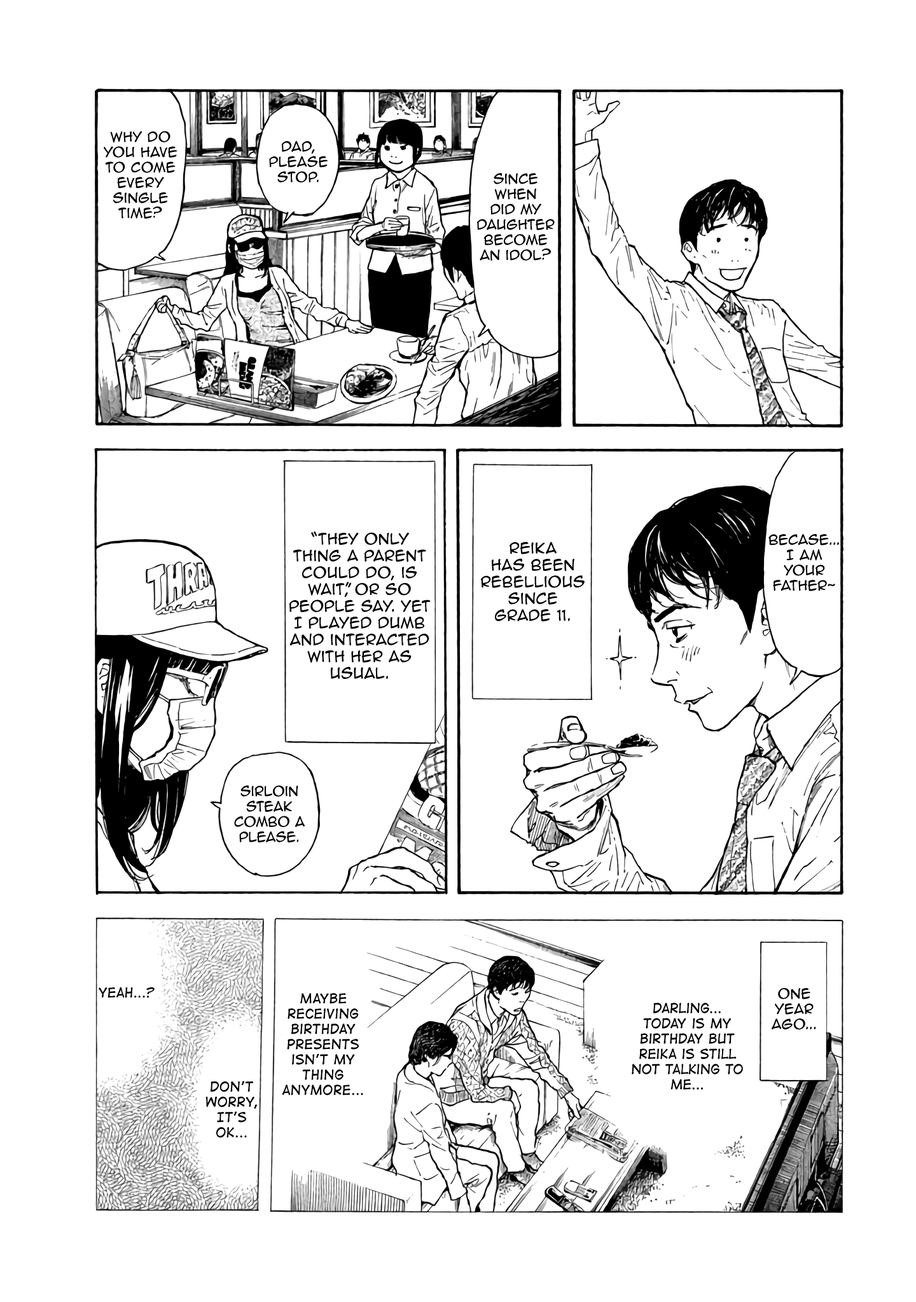
<style>
.page{position:relative;width:916px;height:1302px;background:#ffffff}
.page>*{position:absolute;margin:0}
.t1{font:12.7px "AnimeAce2.0BB";color:#000000}
.t2{font:14px "AnimeAce2.0BB";color:#000000}
.t3{font:12.7px "DigitalStrip";color:#000000}
</style>
<div class="page">
<p class="t1" style="left:104px;top:131px;width:73px;height:88px;text-align:center">Why do you have to come every single time?</p>
<p class="t1" style="left:269px;top:141px;width:59px;height:41px;text-align:center">Dad, Please stop.</p>
<p class="t1" style="left:477px;top:173px;width:77px;height:88px;text-align:center">Since when did my daughter become an idol?</p>
<p class="t2" style="left:289px;top:532px;width:141px;height:148px;text-align:center">“They only thing a parent could do, is wait”, or so people say. Yet I played dumb and interacted with her as usual.</p>
<p class="t2" style="left:481px;top:542px;width:103px;height:80px;text-align:center">Reika has been rebellious since grade 11.</p>
<p class="t1" style="left:768px;top:534px;width:71px;height:57px;text-align:center">Becase... I am your father~</p>
<p class="t1" style="left:234px;top:785px;width:71px;height:58px;text-align:center">Sirloin steak Combo a please.</p>
<p class="t3" style="left:99px;top:988px;width:56px;height:10px">Yeah...?</p>
<p class="t1" style="left:771px;top:988px;width:45px;height:42px;text-align:center">One year ago...</p>
<p class="t3" style="left:282px;top:993px;width:81px;height:103px;text-align:center">Maybe receiving birthday presents isn’t my thing anymore...</p>
<p class="t3" style="left:631px;top:1003px;width:112px;height:87px;text-align:center">Darling... today is my birthday but Reika is still not talking to me...</p>
<p class="t3" style="left:205px;top:1081px;width:52px;height:57px;text-align:center">Don’t worry, It’s ok...</p>
</div>
